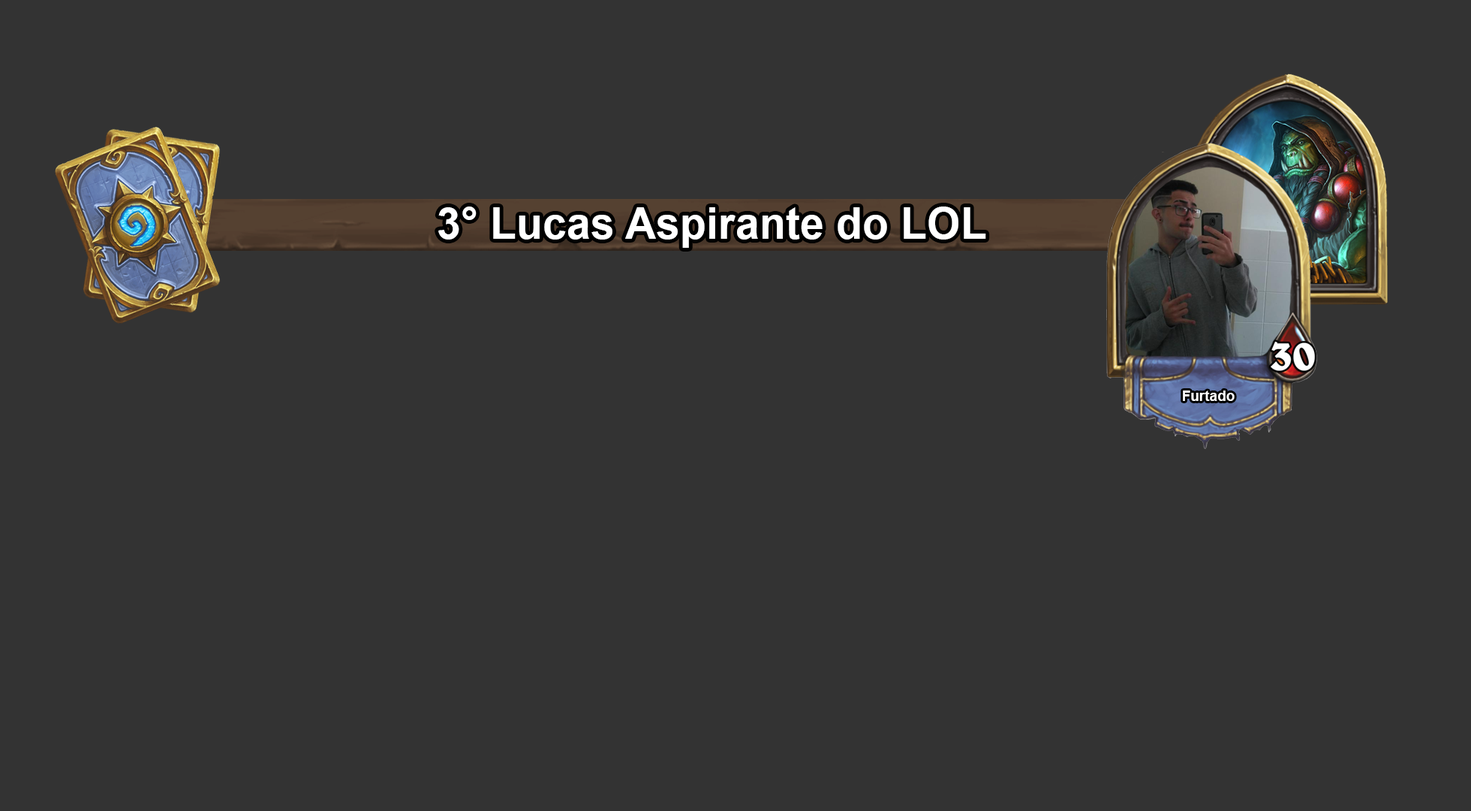
<style>
.page{position:relative;width:1471px;height:811px;background:#333333}
.page>*{position:absolute;margin:0}
.t1{font:43.2px "Arial-BoldMT";color:#ffffff}
.t2{font:14.6px "Arial-BoldMT";color:#ffffff}
</style>
<div class="page">
<p class="t1" style="left:438px;top:206px;width:548px;height:42px">3° Lucas Aspirante do LOL</p>
<p class="t2" style="left:1183px;top:390px;width:52px;height:11px">Furtado</p>
</div>
